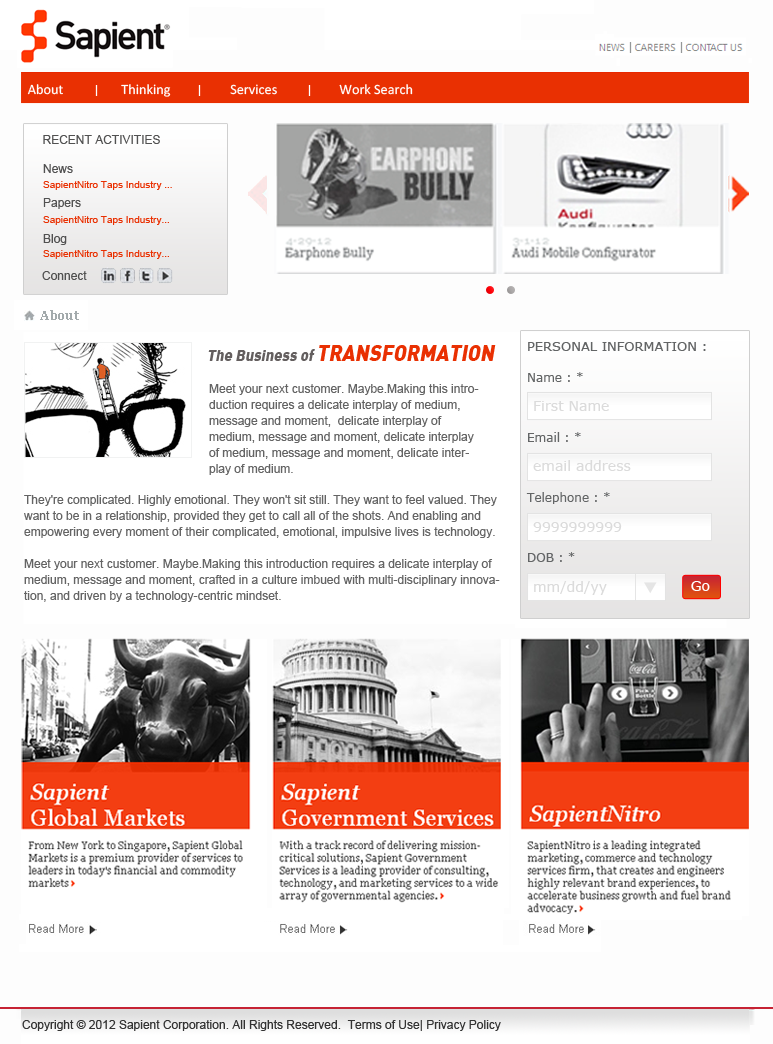
<style>
.page{position:relative;width:773px;height:1044px;background:#ffffff}
.page>*{position:absolute;margin:0}
.t1{font:11px "Verdana";color:#959899}
.t2{font:14.3px "Calibri";color:#ffffff}
.t3{font:12px "ArialMT";color:#515151}
.t4{font:10px "ArialMT";color:#e93002}
.t5{font:13px "Verdana";color:#636566}
.t6{font:16px "SapientSansBlackItalic";color:#645f5f}
.t7{font:22px "SapientSansBlackItalic";color:#e93002}
.t8{font:12px/60px "Verdana";color:#636566}
.t9{font:12px/16px "ArialMT";color:#646464}
.t10{font:14px "Verdana";color:#dbdbdb}
.t11{font:14px "Verdana";color:#ffffff}
.t12{font:12px "ArialMT";color:#333333}
</style>
<div class="page">
<p class="t1" style="left:629px;top:42px;width:3px;height:11px">|</p>
<p class="t1" style="left:680px;top:42px;width:3px;height:11px">|</p>
<p class="t2" style="left:27px;top:84px;width:386px;height:13px">About        Thinking         Services         Work Search</p>
<p class="t3" style="left:43px;top:135px;width:117px;height:9px">RECENT ACTIVITIES</p>
<p class="t3" style="left:43px;top:164px;width:30px;height:9px">News</p>
<p class="t4" style="left:43px;top:181px;width:129px;height:9px">SapientNitro Taps Industry ...</p>
<p class="t3" style="left:43px;top:198px;width:38px;height:11px">Papers</p>
<p class="t4" style="left:43px;top:216px;width:126px;height:9px">SapientNitro Taps Industry...</p>
<p class="t3" style="left:43px;top:234px;width:24px;height:11px">Blog</p>
<p class="t4" style="left:43px;top:250px;width:126px;height:9px">SapientNitro Taps Industry...</p>
<p class="t3" style="left:42px;top:271px;width:45px;height:9px">Connect</p>
<p class="t5" style="left:528px;top:342px;width:178px;height:9px">PERSONAL INFORMATION :</p>
<p class="t6" style="left:208px;top:345px;width:288px;height:16px">The Business of <span class="t7">TRANSFORMATION</span></p>
<p class="t8" style="left:526px;top:372px;width:84px;height:190px">Name : *<br>Email : *<br>Telephone : *<br>DOB : *</p>
<p class="t9" style="left:209px;top:384px;width:270px;height:91px">Meet your next customer. Maybe.Making this introduction requires a delicate interplay of medium, message and moment,  delicate interplay of medium, message and moment, delicate interplay of medium, message and moment, delicate interplay of medium.</p>
<p class="t10" style="left:534px;top:401px;width:75px;height:10px">First Name</p>
<p class="t10" style="left:533px;top:460px;width:98px;height:11px">email address</p>
<p class="t9" style="left:24px;top:495px;width:476px;height:107px">They're complicated. Highly emotional. They won't sit still. They want to feel valued. They want to be in a relationship, provided they get to call all of the shots. And enabling and empowering every moment of their complicated, emotional, impulsive lives is technology.<br><br>Meet your next customer. Maybe.Making this introduction requires a delicate interplay of medium, message and moment, crafted in a culture imbued with multi-disciplinary innovation, and driven by a technology-centric mindset.</p>
<p class="t10" style="left:533px;top:522px;width:89px;height:10px">9999999999</p>
<p class="t10" style="left:534px;top:581px;width:73px;height:14px">mm/dd/yy</p>
<p class="t11" style="left:691px;top:581px;width:19px;height:10px">Go</p>
<p class="t12" style="left:22px;top:1020px;width:479px;height:11px">Copyright © 2012 Sapient Corporation. All Rights Reserved.  Terms of Use| Privacy Policy</p>
</div>
